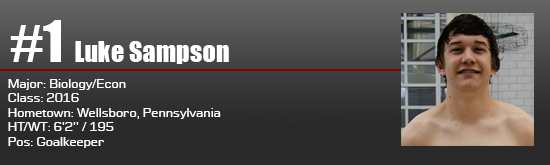
<style>
.page{position:relative;width:550px;height:165px}
.page>*{position:absolute;margin:0}
.t1{font:52.8px "Impact";color:#ffffff}
.t2{font:26.4px "Impact";color:#ffffff}
.t3{font:12px "Moire";color:#ffffff}
</style>
<div class="page">
<p class="t1" style="left:10px;top:20px;width:51px;height:42px">#1</p>
<p class="t2" style="left:75px;top:41px;width:154px;height:23px">Luke Sampson</p>
<p class="t3" style="left:8px;top:79px;width:213px;height:69px">Major: Biology/Econ<br>Class: 2016<br>Hometown: Wellsboro, Pennsylvania<br>HT/WT: 6'2'' / 195<br>Pos: Goalkeeper</p>
</div>
